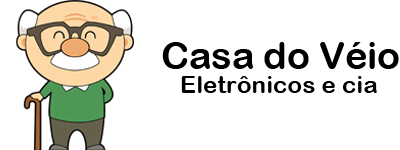
<style>
.page{position:relative;width:400px;height:150px;background:#ffffff}
.page>*{position:absolute;margin:0}
.t1{font:37.6px "ArialRoundedMTBold";color:#000000}
.t2{font:24.4px "ArialRoundedMTBold";color:#000000}
</style>
<div class="page">
<p class="t1" style="left:162px;top:42px;width:237px;height:27px">Casa do Véio</p>
<p class="t2" style="left:181px;top:76px;width:196px;height:17px">Eletrônicos e cia</p>
</div>
